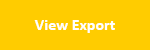
<style>
.page{position:relative;width:150px;height:50px;background:#ffcc00}
.page>*{position:absolute;margin:0}
.t1{font:16px "Calibri-Bold";color:#ffffff}
</style>
<div class="page">
<p class="t1" style="left:34px;top:20px;width:81px;height:13px">View Export</p>
</div>
